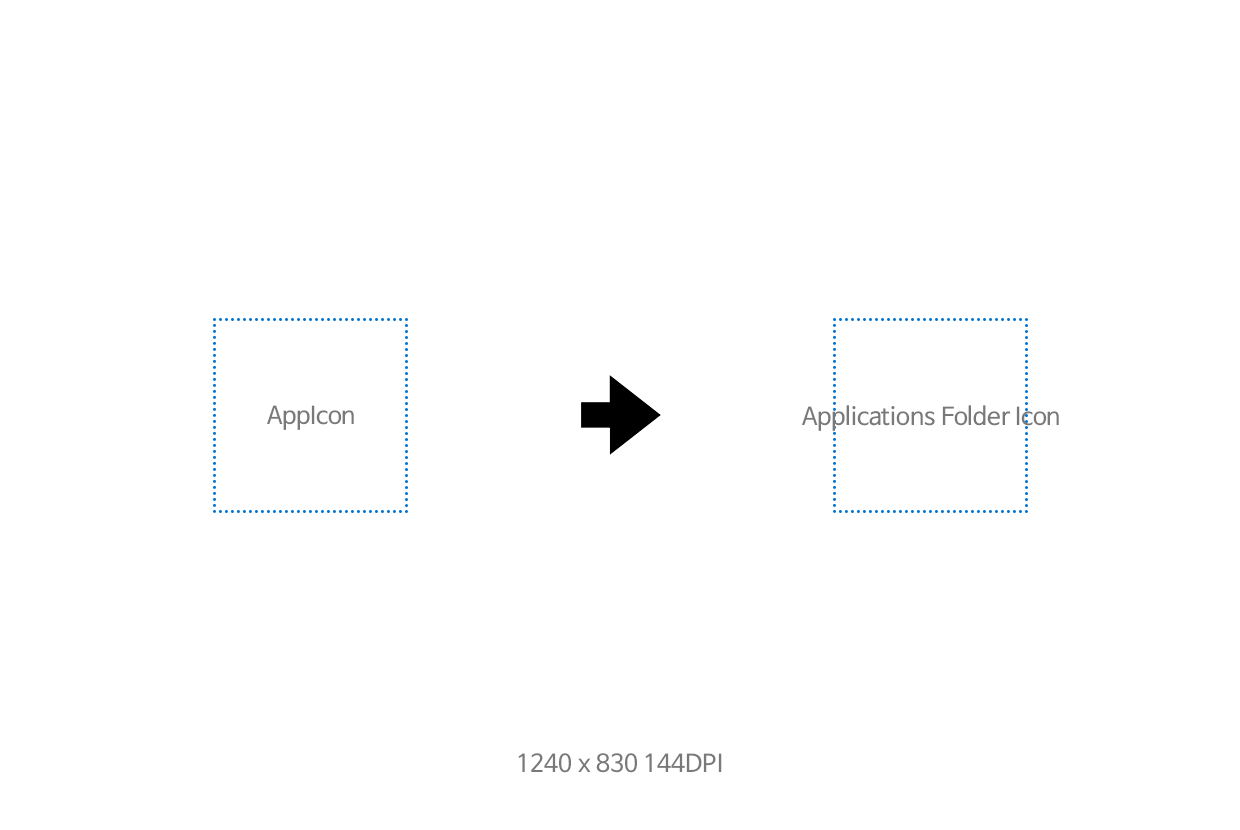
<style>
.page{position:relative;width:1240px;height:830px;background:#ffffff}
.page>*{position:absolute;margin:0}
.t1{font:24px "NanumBarunGothicOTF-YetHangul";color:#797979}
</style>
<div class="page">
<p class="t1" style="left:267px;top:405px;width:87px;height:25px">AppIcon</p>
<p class="t1" style="left:802px;top:405px;width:257px;height:26px">Applications Folder Icon</p>
<p class="t1" style="left:518px;top:753px;width:204px;height:20px">1240 x 830 144DPI</p>
</div>
